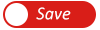
<style>
.page{position:relative;width:100px;height:30px;background:#d91e18}
.page>*{position:absolute;margin:0}
.t1{font:18px "Calibri-Italic";color:#ffffff}
</style>
<div class="page">
<p class="t1" style="left:36px;top:7px;width:35px;height:13px">Save</p>
</div>
